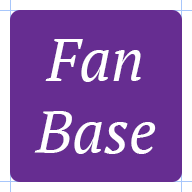
<style>
.page{position:relative;width:192px;height:192px;background:#662d91}
.page>*{position:absolute;margin:0}
.t1{font:60px "PTSerif-Italic";color:#ffffff}
</style>
<div class="page">
<p class="t1" style="left:34px;top:39px;width:122px;height:115px;text-align:center">Fan<br>Base</p>
</div>
